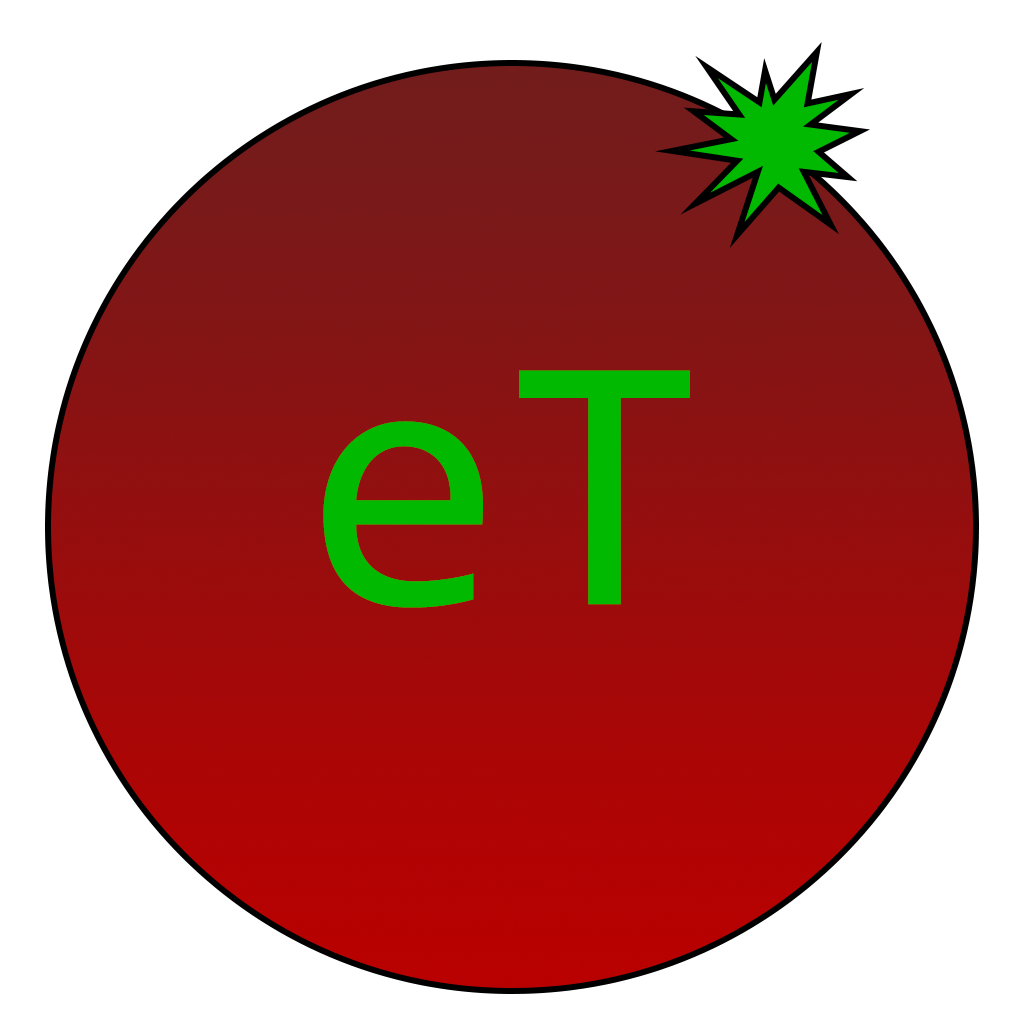
<style>
.page{position:relative;width:1024px;height:1024px;background:#ffffff}
.page>*{position:absolute;margin:0}
.t1{font:366px "Consolas";color:#00b900}
</style>
<div class="page">
<p class="t1" style="left:323px;top:370px;width:367px;height:238px">eT</p>
</div>
